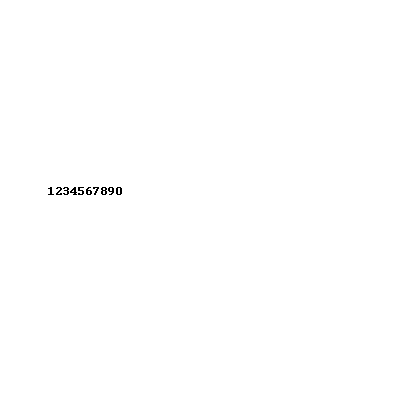
<style>
.page{position:relative;width:400px;height:400px;background:#ffffff}
.page>*{position:absolute;margin:0}
.t1{font:12px "CambriaMath";letter-spacing:-0.04em;color:#000000;font-weight:bold}
</style>
<div class="page">
<p class="t1" style="left:48px;top:187px;width:74px;height:8px">1234567890</p>
</div>
